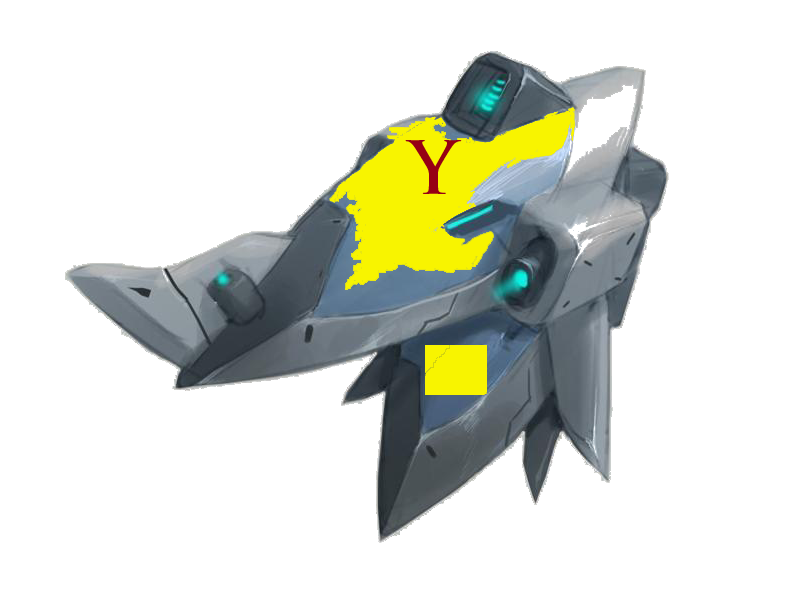
<style>
.page{position:relative;width:800px;height:600px;background:#ffffff}
.page>*{position:absolute;margin:0}
.t1{font:72px "TrajanPro-Bold";color:#960014}
</style>
<div class="page">
<p class="t1" style="left:405px;top:140px;width:57px;height:54px">Y</p>
</div>
